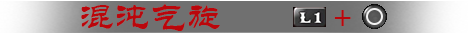
<style>
.page{position:relative;width:468px;height:33px;background:#707070}
.page>*{position:absolute;margin:0}
.t1{font:36px "STLiti";color:#ba060b}
</style>
<div class="page">
<p class="t1" style="left:81px;top:4px;width:270px;height:27px">混沌气旋   +</p>
</div>
